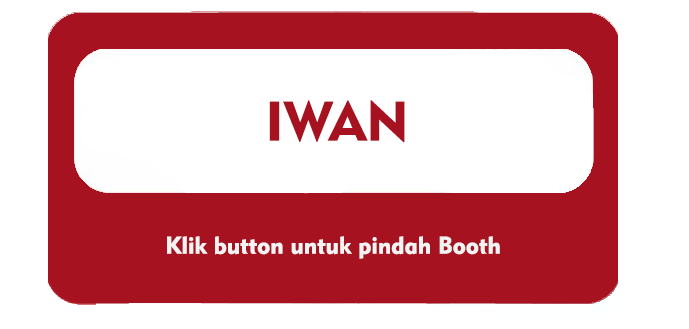
<style>
.page{position:relative;width:689px;height:329px;background:#ffffff}
.page>*{position:absolute;margin:0}
.t1{font:55px "Geometric415BT-BlackA";color:#a61220}
.t2{font:24px "Geometric415BT-BlackA";color:#f3f3f3}
</style>
<div class="page">
<p class="t1" style="left:269px;top:100px;width:136px;height:43px">IWAN</p>
<p class="t2" style="left:167px;top:236px;width:333px;height:23px">Klik button untuk pindah Booth</p>
</div>
